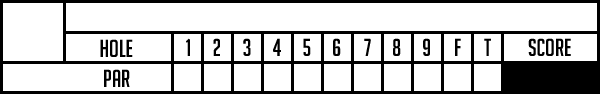
<style>
.page{position:relative;width:600px;height:94px;background:#ffffff}
.page>*{position:absolute;margin:0}
.t1{font:24px "BigNoodleTitling";color:#000000}
</style>
<div class="page">
<p class="t1" style="left:100px;top:39px;width:33px;height:18px">Hole</p>
<p class="t1" style="left:186px;top:38px;width:4px;height:18px">1</p>
<p class="t1" style="left:213px;top:38px;width:7px;height:18px">2</p>
<p class="t1" style="left:243px;top:38px;width:8px;height:18px">3</p>
<p class="t1" style="left:273px;top:38px;width:8px;height:18px">4</p>
<p class="t1" style="left:303px;top:38px;width:8px;height:18px">5</p>
<p class="t1" style="left:333px;top:38px;width:8px;height:18px">6</p>
<p class="t1" style="left:364px;top:38px;width:7px;height:18px">7</p>
<p class="t1" style="left:393px;top:38px;width:8px;height:18px">8</p>
<p class="t1" style="left:423px;top:38px;width:7px;height:18px">9</p>
<p class="t1" style="left:455px;top:38px;width:6px;height:18px">f</p>
<p class="t1" style="left:484px;top:38px;width:7px;height:18px">t</p>
<p class="t1" style="left:528px;top:38px;width:43px;height:18px">score</p>
<p class="t1" style="left:104px;top:69px;width:26px;height:18px">par</p>
</div>
